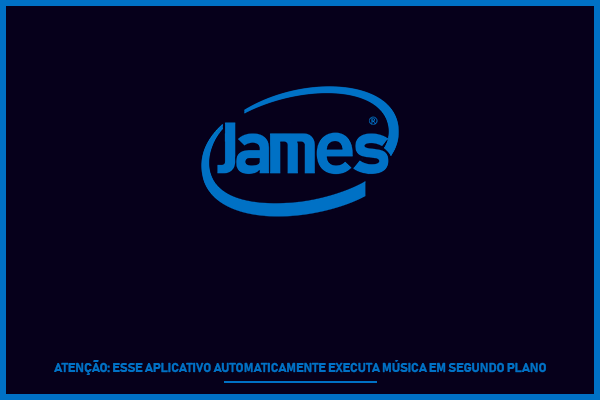
<style>
.page{position:relative;width:600px;height:400px;background:#06001b}
.page>*{position:absolute;margin:0}
.t1{font:12.5px "Bahnschrift-Bold";color:#0071c5;text-transform:uppercase}
</style>
<div class="page">
<p class="t1" style="left:54px;top:360px;width:492px;height:15px">Atenção: Esse aplicativo automaticamente executa música em segundo plano</p>
</div>
